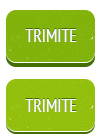
<style>
.page{position:relative;width:100px;height:136px;background:#ffffff}
.page>*{position:absolute;margin:0}
.t1{font:17.8px "PTSans-Narrow";color:#fdfbfa}
</style>
<div class="page">
<p class="t1" style="left:25px;top:29px;width:52px;height:13px">TRIMITE</p>
<p class="t1" style="left:25px;top:99px;width:52px;height:13px">TRIMITE</p>
</div>
